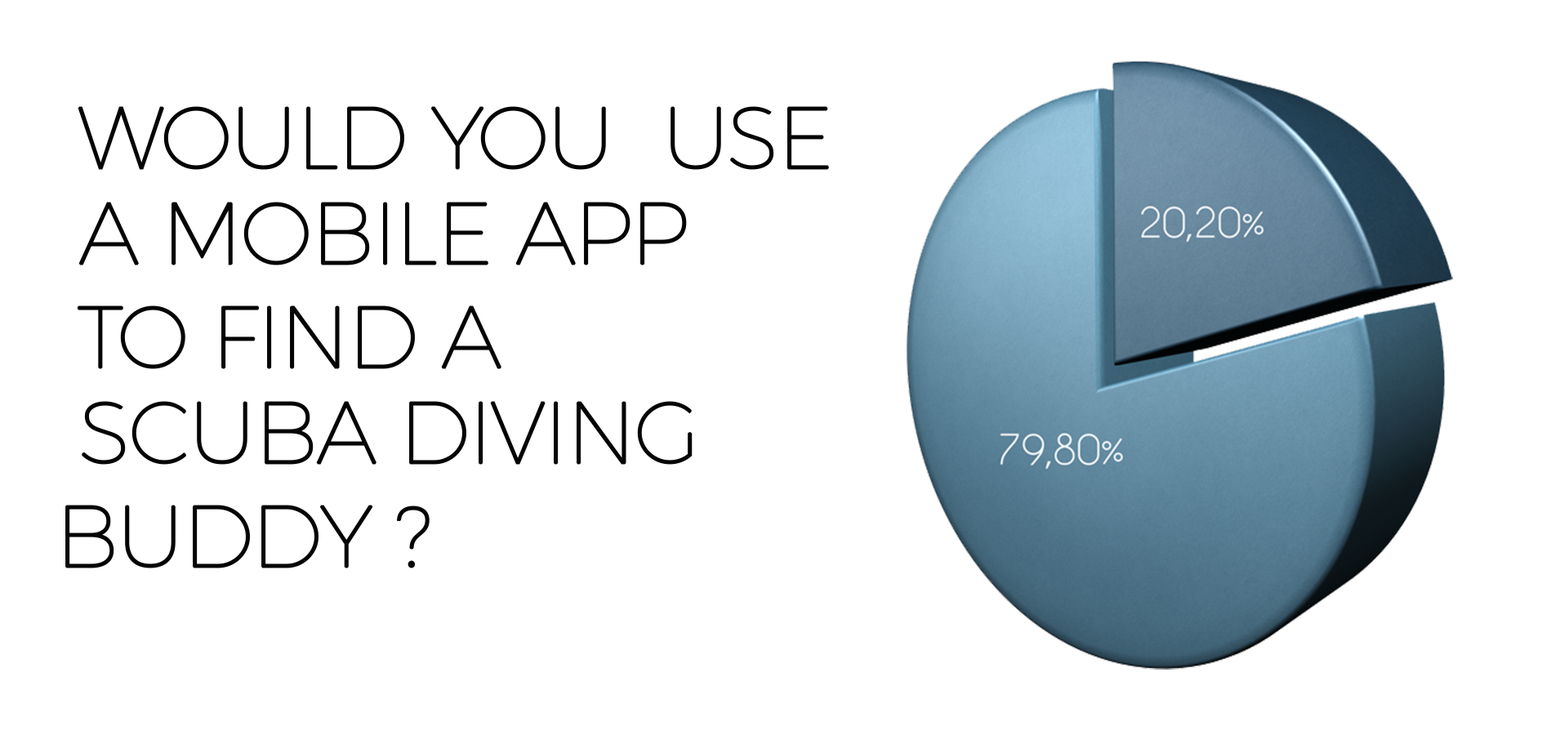
<style>
.page{position:relative;width:1568px;height:735px;background:#ffffff}
.page>*{position:absolute;margin:0}
.t1{font:86.4px "Montserrat-Thin";letter-spacing:-0.04em;color:#040404;text-transform:uppercase;font-weight:bold}
</style>
<div class="page">
<p class="t1" style="left:78px;top:106px;width:751px;height:64px">WOuld you  USE</p>
<p class="t1" style="left:78px;top:202px;width:609px;height:63px">A MOBILE APP</p>
<p class="t1" style="left:77px;top:305px;width:424px;height:64px">TO FIND A</p>
<p class="t1" style="left:82px;top:401px;width:611px;height:64px">scuba diving</p>
<p class="t1" style="left:65px;top:505px;width:365px;height:63px">buddy ?</p>
</div>
